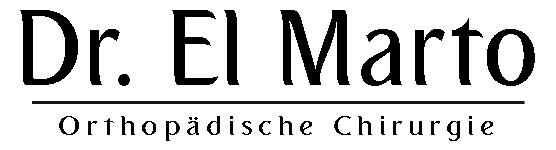
<style>
.page{position:relative;width:556px;height:150px;background:#ffffff}
.page>*{position:absolute;margin:0}
.t1{font:25px/50px "Emirates-Medium";letter-spacing:0.18em;color:#000000;scale:1.25 1}
.t2{font:104.2px/50px "Emirates-Medium";letter-spacing:0.02em;color:#000000}
.t3{font:25px/50px "Emirates-Medium";letter-spacing:0.66em;color:#000000;scale:1.25 1}
</style>
<div class="page">
<p class="t1" style="left:20px;top:10px;width:515px;height:131px"><span class="t2">Dr. El Marto<br>  </span>Orthopädische Chirurgi<span class="t3">e</span></p>
</div>
